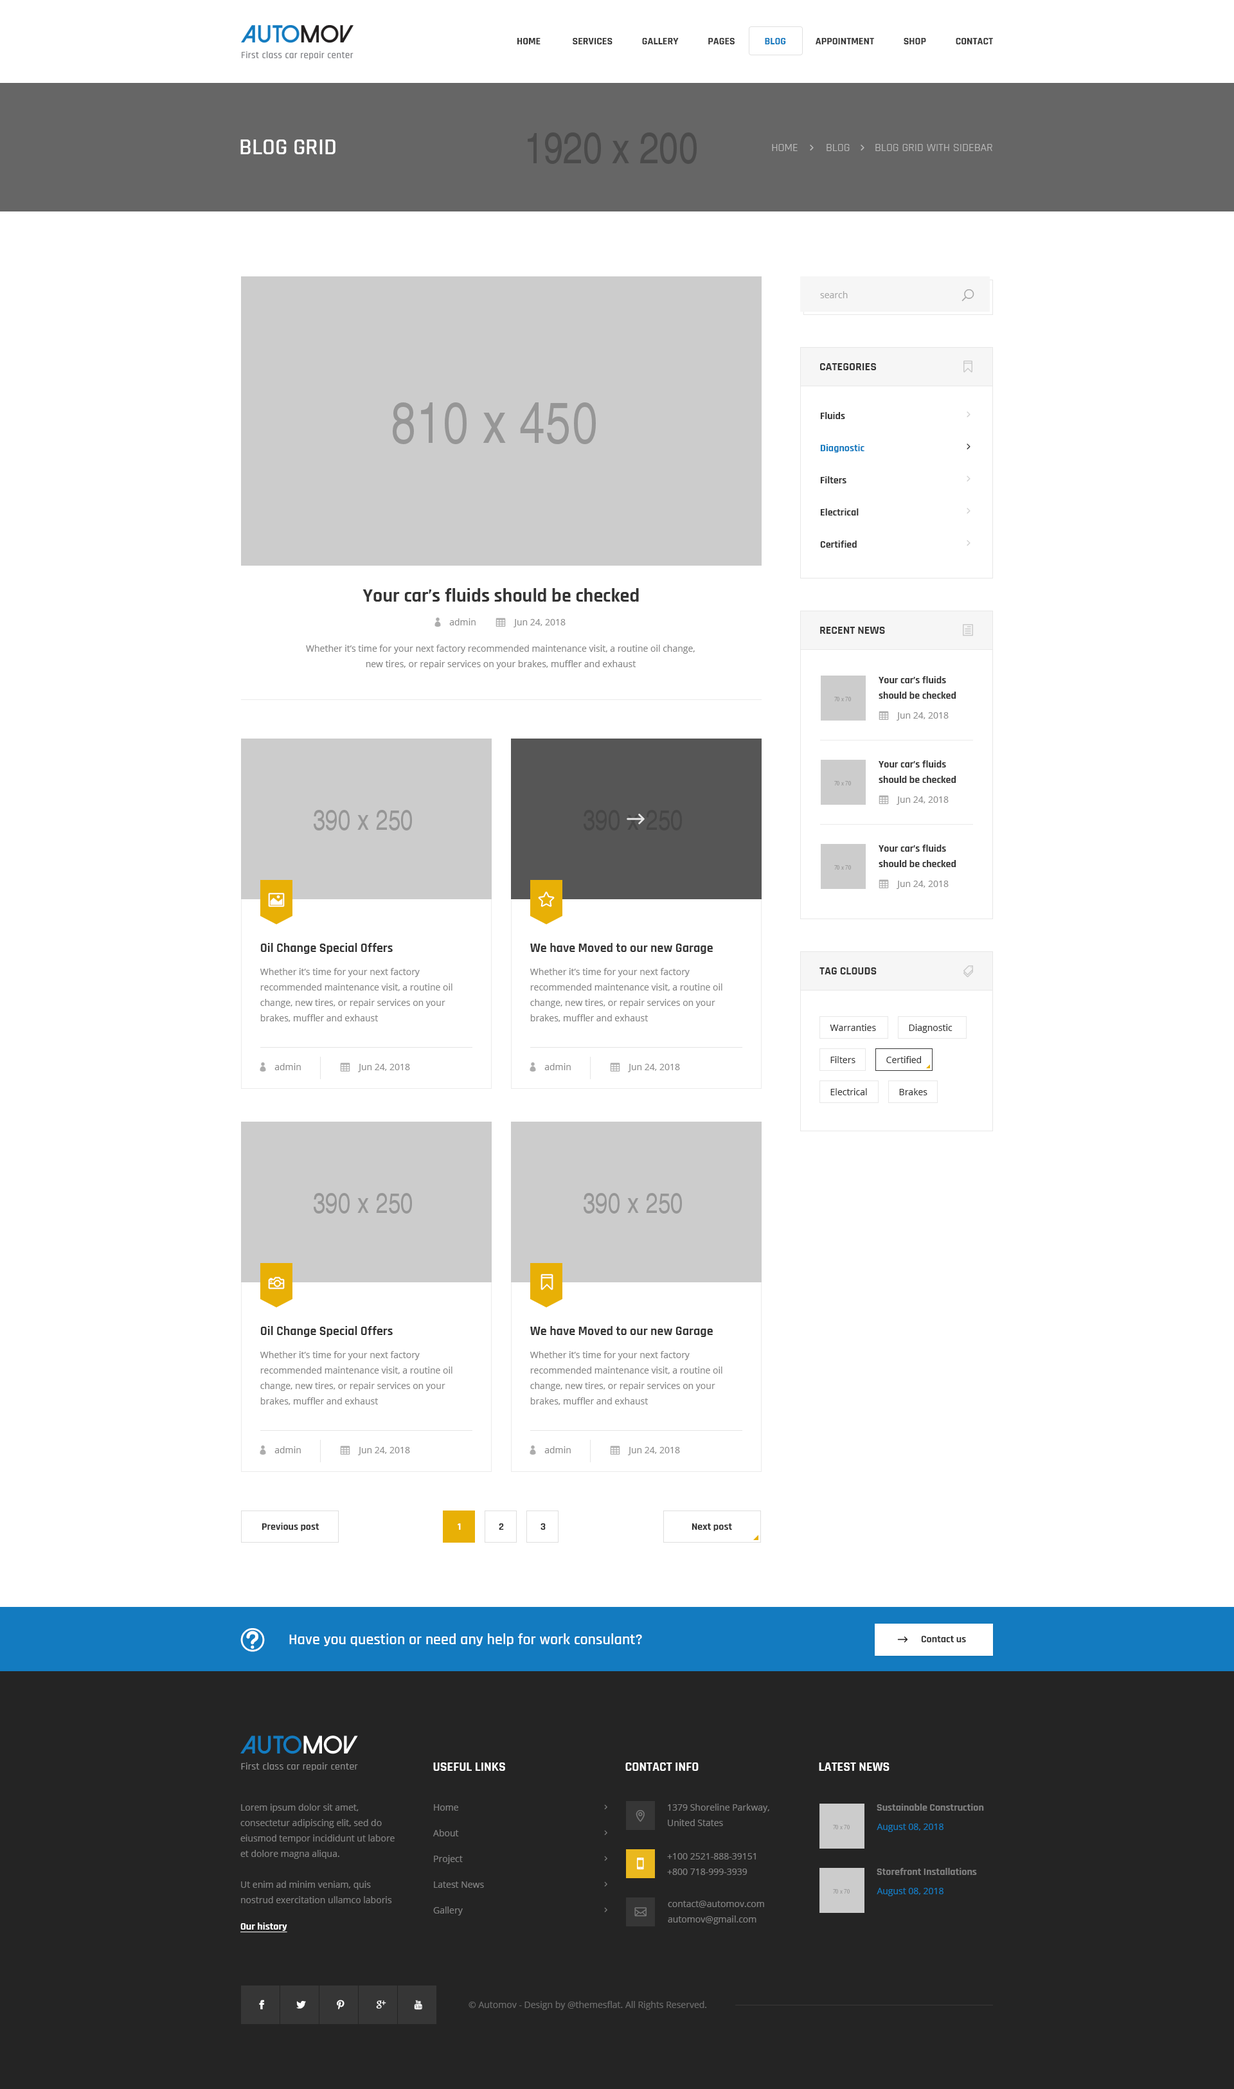
<style>
.page{position:relative;width:1234px;height:2089px;background:#ffffff}
.page>*{position:absolute;margin:0}
.t1{font:10.3px "Rajdhani-Bold";color:#363636;text-transform:uppercase}
.t2{font:10.3px "Rajdhani-Bold";color:#137bc0;text-transform:uppercase}
.t3{font:23.1px "Rajdhani-SemiBold";color:#ffffff;text-transform:uppercase}
.t4{font:11.6px "Rajdhani-Regular";color:#bcbcbc}
.t5{font:9px "OpenSans";color:#a7a7a7}
.t6{font:11.6px "Rajdhani-Bold";color:#363636;text-transform:uppercase}
.t7{font:10.3px/32.1px "Rajdhani-Bold";color:#343434}
.t8{font:10.3px/32.1px "Rajdhani-Bold";color:#137bc0}
.t9{font:19.3px "Rajdhani-Bold";color:#343434}
.t10{font:9px "OpenSans";color:#8d8d8d}
.t11{font:9px/15.4px "OpenSans";color:#858585}
.t12{font:10.3px/15.4px "Rajdhani-Bold";color:#343434}
.t13{font:12.9px "Rajdhani-Bold";color:#343434}
.t14{font:9px "OpenSans";color:#343434}
.t15{font:10.3px "Rajdhani-Bold";color:#343434}
.t16{font:10.3px "Rajdhani-Bold";color:#ffffff}
.t17{font:15.4px "Rajdhani-SemiBold";color:#ffffff}
.t18{font:10.3px "Rajdhani-Bold";color:#363636}
.t19{font:12.9px "Rajdhani-Bold";color:#ffffff;text-transform:uppercase}
.t20{font:12.9px "Rajdhani-Bold";color:#ffffff}
.t21{font:9px/15.4px "OpenSans";color:#808080}
.t22{font:9px/25.7px "OpenSans";color:#808080}
.t23{font:10.3px "Rajdhani-Bold";color:#808080}
.t24{font:9px "OpenSans";color:#137bc0}
.t25{font:10.3px "Rajdhani-Bold";color:#ffffff;text-decoration:underline}
.t26{font:9px "OpenSans";color:#6a6a6a}
</style>
<div class="page">
<p class="t1" style="left:517px;top:38px;width:476px;height:6px">Home              Services             Gallery             Pages       <span class="t2">      Blog    </span>         Appointment             Shop             Contact</p>
<p class="t3" style="left:240px;top:140px;width:96px;height:14px">blog grid</p>
<p class="t4" style="left:772px;top:144px;width:221px;height:7px">HOME         BLOG        BLOG GRID WITH SIDEBAR</p>
<p class="t5" style="left:820px;top:291px;width:28px;height:7px">search</p>
<p class="t6" style="left:820px;top:363px;width:57px;height:7px">Categories</p>
<p class="t7" style="left:820px;top:412px;width:45px;height:136px">Fluids<br><span class="t8">Diagnostic<br></span>Filters<br>Electrical<br>Certified</p>
<p class="t9" style="left:363px;top:588px;width:276px;height:14px">Your car’s fluids should be checked</p>
<p class="t10" style="left:449px;top:618px;width:27px;height:8px">admin</p>
<p class="t10" style="left:514px;top:619px;width:52px;height:8px">Jun 24, 2018</p>
<p class="t6" style="left:820px;top:627px;width:65px;height:7px">RECENT NEWS</p>
<p class="t11" style="left:306px;top:645px;width:389px;height:24px;text-align:center">Whether it’s time for your next factory recommended maintenance visit, a routine oil change, new tires, or repair services on your brakes, muffler and exhaust</p>
<p class="t12" style="left:879px;top:676px;width:78px;height:23px">Your car’s fluids should be checked</p>
<p class="t10" style="left:897px;top:712px;width:52px;height:9px">Jun 24, 2018</p>
<p class="t12" style="left:879px;top:760px;width:78px;height:23px">Your car’s fluids should be checked</p>
<p class="t10" style="left:897px;top:797px;width:52px;height:8px">Jun 24, 2018</p>
<p class="t12" style="left:879px;top:845px;width:78px;height:22px">Your car’s fluids should be checked</p>
<p class="t10" style="left:897px;top:881px;width:52px;height:8px">Jun 24, 2018</p>
<p class="t13" style="left:260px;top:943px;width:133px;height:11px">Oil Change Special Offers</p>
<p class="t13" style="left:530px;top:943px;width:183px;height:11px">We have Moved to our new Garage</p>
<p class="t11" style="left:260px;top:968px;width:193px;height:54px">Whether it’s time for your next factory recommended maintenance visit, a routine oil change, new tires, or repair services on your brakes, muffler and exhaust</p>
<p class="t11" style="left:530px;top:968px;width:193px;height:54px">Whether it’s time for your next factory recommended maintenance visit, a routine oil change, new tires, or repair services on your brakes, muffler and exhaust</p>
<p class="t6" style="left:820px;top:968px;width:57px;height:7px">Tag clouds</p>
<p class="t14" style="left:830px;top:1024px;width:46px;height:7px">Warranties</p>
<p class="t14" style="left:909px;top:1024px;width:44px;height:9px">Diagnostic</p>
<p class="t14" style="left:831px;top:1056px;width:25px;height:7px">Filters</p>
<p class="t14" style="left:887px;top:1056px;width:34px;height:7px">Certified</p>
<p class="t10" style="left:274px;top:1063px;width:27px;height:7px">admin</p>
<p class="t10" style="left:358px;top:1064px;width:52px;height:8px">Jun 24, 2018</p>
<p class="t10" style="left:544px;top:1063px;width:27px;height:7px">admin</p>
<p class="t10" style="left:628px;top:1064px;width:52px;height:8px">Jun 24, 2018</p>
<p class="t14" style="left:831px;top:1088px;width:36px;height:7px">Electrical</p>
<p class="t14" style="left:899px;top:1088px;width:29px;height:7px">Brakes</p>
<p class="t13" style="left:260px;top:1326px;width:133px;height:11px">Oil Change Special Offers</p>
<p class="t13" style="left:530px;top:1326px;width:183px;height:11px">We have Moved to our new Garage</p>
<p class="t11" style="left:260px;top:1351px;width:193px;height:54px">Whether it’s time for your next factory recommended maintenance visit, a routine oil change, new tires, or repair services on your brakes, muffler and exhaust</p>
<p class="t11" style="left:530px;top:1351px;width:193px;height:54px">Whether it’s time for your next factory recommended maintenance visit, a routine oil change, new tires, or repair services on your brakes, muffler and exhaust</p>
<p class="t10" style="left:274px;top:1446px;width:27px;height:8px">admin</p>
<p class="t10" style="left:358px;top:1447px;width:52px;height:8px">Jun 24, 2018</p>
<p class="t10" style="left:544px;top:1446px;width:27px;height:8px">admin</p>
<p class="t10" style="left:628px;top:1447px;width:52px;height:8px">Jun 24, 2018</p>
<p class="t15" style="left:262px;top:1523px;width:58px;height:8px">Previous post</p>
<p class="t16" style="left:458px;top:1524px;width:3px;height:6px">1</p>
<p class="t15" style="left:499px;top:1524px;width:5px;height:6px">2</p>
<p class="t15" style="left:541px;top:1524px;width:5px;height:6px">3</p>
<p class="t15" style="left:692px;top:1524px;width:40px;height:7px">Next post</p>
<p class="t17" style="left:289px;top:1634px;width:353px;height:12px">Have you question or need any help for work consulant?</p>
<p class="t18" style="left:921px;top:1636px;width:45px;height:7px">Contact us</p>
<p class="t19" style="left:433px;top:1763px;width:72px;height:8px">Useful Links</p>
<p class="t20" style="left:626px;top:1763px;width:73px;height:8px">CONTACT INFO</p>
<p class="t19" style="left:819px;top:1763px;width:71px;height:8px">Latest news</p>
<p class="t21" style="left:240px;top:1804px;width:155px;height:100px">Lorem ipsum dolor sit amet, consectetur adipiscing elit, sed do eiusmod tempor incididunt ut labore et dolore magna aliqua. <br><br>Ut enim ad minim veniam, quis nostrud exercitation ullamco laboris nisi</p>
<p class="t22" style="left:433px;top:1805px;width:51px;height:111px">Home<br>About<br>Project<br>Latest News<br>Gallery</p>
<p class="t21" style="left:668px;top:1804px;width:102px;height:22px">1379 Shoreline Parkway, <br>United States</p>
<p class="t23" style="left:877px;top:1804px;width:107px;height:7px">Sustainable Construction</p>
<p class="t24" style="left:877px;top:1824px;width:67px;height:8px">August 08, 2018</p>
<p class="t21" style="left:667px;top:1853px;width:89px;height:22px">+100 2521-888-39151<br>+800 718-999-3939</p>
<p class="t23" style="left:877px;top:1868px;width:100px;height:7px">Storefront Installations</p>
<p class="t24" style="left:877px;top:1888px;width:67px;height:8px">August 08, 2018</p>
<p class="t21" style="left:668px;top:1901px;width:96px;height:24px">contact@automov.com<br>automov@gmail.com</p>
<p class="t25" style="left:240px;top:1923px;width:47px;height:10px">Our history</p>
<p class="t26" style="left:469px;top:2001px;width:237px;height:9px">© Automov - Design by @themesflat. All Rights Reserved.</p>
</div>
